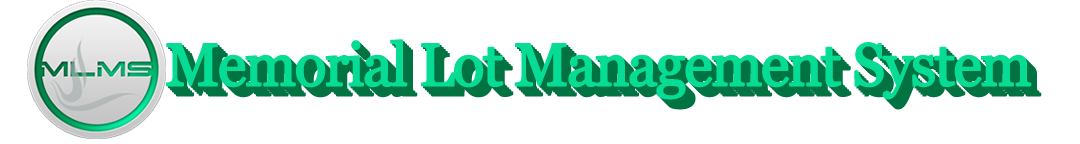
<style>
.page{position:relative;width:1080px;height:144px;background:#ffffff}
.page>*{position:absolute;margin:0}
.t1{font:60px "Georgia";letter-spacing:-0.05em;color:#06dc93;font-weight:bold;scale:0.97 1}
.t2{font:60px "Georgia";letter-spacing:-0.05em;font-weight:bold;scale:0.97 1}
.t3{font:60px "Georgia";letter-spacing:-0.05em;color:#017342;font-weight:bold;scale:0.97 1}
</style>
<div class="page">
<p class="t1" style="left:166px;top:39px;width:866px;height:61px">Memorial Lot Management System</p>
<p class="t2" style="left:168px;top:41px;width:866px;height:61px">Memorial Lot Management System</p>
<p class="t2" style="left:170px;top:43px;width:866px;height:61px">Memorial Lot Management System</p>
<p class="t3" style="left:172px;top:45px;width:866px;height:61px">Memorial Lot Management System</p>
<p class="t3" style="left:174px;top:47px;width:866px;height:61px">Memorial Lot Management System</p>
<p class="t3" style="left:176px;top:49px;width:866px;height:61px">Memorial Lot Management System</p>
</div>
